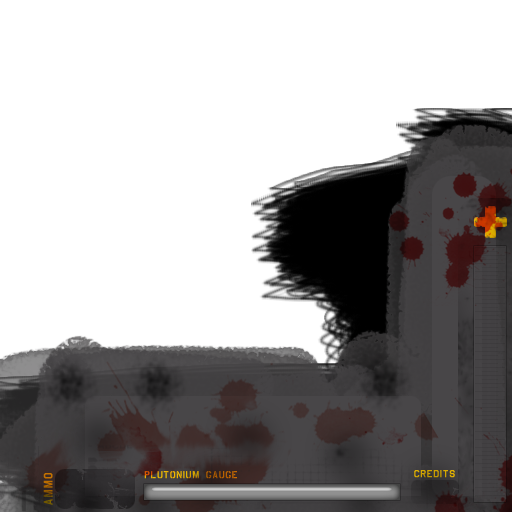
<style>
.page{position:relative;width:512px;height:512px;background:#ffffff}
.page>*{position:absolute;margin:0}
.t1{font:12px "USAAF_Stencil";letter-spacing:0.1em}
.t2{font:10px "USAAF_Stencil";letter-spacing:0.1em}
.t3{font:10px "USAAF_Stencil";letter-spacing:0.1em;color:#d2a500}
</style>
<div class="page">
<p class="t1" style="left:43px;top:473px;width:10px;height:32px;rotate:-90deg">ammo</p>
<p class="t2" style="left:144px;top:471px;width:93px;height:8px">PLUTONIUM GAUGE</p>
<p class="t3" style="left:414px;top:470px;width:41px;height:8px">credits</p>
</div>
